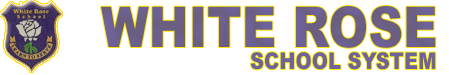
<style>
.page{position:relative;width:449px;height:75px;background:#ffffff}
.page>*{position:absolute;margin:0}
.t1{font:56.2px "Arial-Black";color:#6b6089;scale:0.85 1}
.t2{font:22.9px "Arial-Black";color:#6e639f;scale:0.85 1}
</style>
<div class="page">
<p class="t1" style="left:101px;top:6px;width:335px;height:42px">WHITE ROSE</p>
<p class="t2" style="left:250px;top:52px;width:186px;height:18px">SCHOOL SYSTEM</p>
</div>
